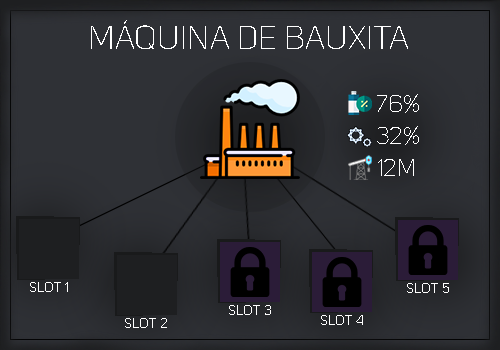
<style>
.page{position:relative;width:500px;height:350px;background:#2f3136}
.page>*{position:absolute;margin:0}
.t1{font:32.9px "UniSans-Light";color:#ffffff;text-transform:uppercase}
.t2{font:23.5px "UniSans-Light";color:#ffffff;text-transform:uppercase}
.t3{font:14.1px "UniSans-Light";color:#ffffff;text-transform:uppercase}
</style>
<div class="page">
<p class="t1" style="left:91px;top:20px;width:317px;height:29px">máquina de bauxita</p>
<p class="t2" style="left:377px;top:94px;width:42px;height:19px">76%</p>
<p class="t2" style="left:377px;top:126px;width:42px;height:19px">32%</p>
<p class="t2" style="left:378px;top:159px;width:36px;height:17px">12M</p>
<p class="t3" style="left:30px;top:282px;width:38px;height:10px">slot 1</p>
<p class="t3" style="left:407px;top:283px;width:42px;height:10px">SLOT 5</p>
<p class="t3" style="left:229px;top:305px;width:42px;height:10px">slot 3</p>
<p class="t3" style="left:125px;top:318px;width:42px;height:10px">SLOT 2</p>
<p class="t3" style="left:321px;top:315px;width:42px;height:10px">SLOT 4</p>
</div>
